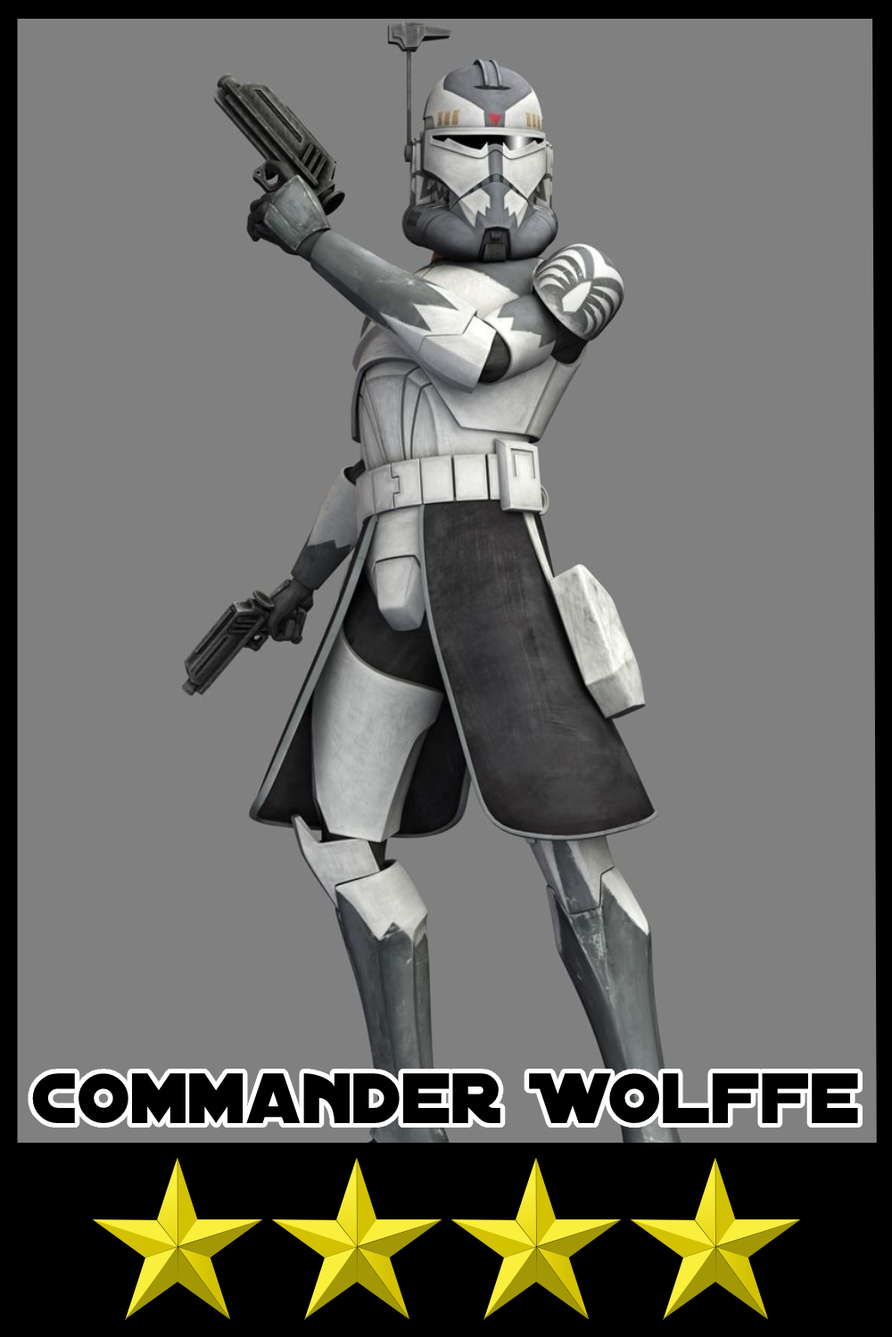
<style>
.page{position:relative;width:892px;height:1337px;background:#808080}
.page>*{position:absolute;margin:0}
.t1{font:76.3px "DistantGalaxy";color:#000000}
</style>
<div class="page">
<p class="t1" style="left:32px;top:1073px;width:826px;height:50px">Commander Wolffe</p>
</div>
